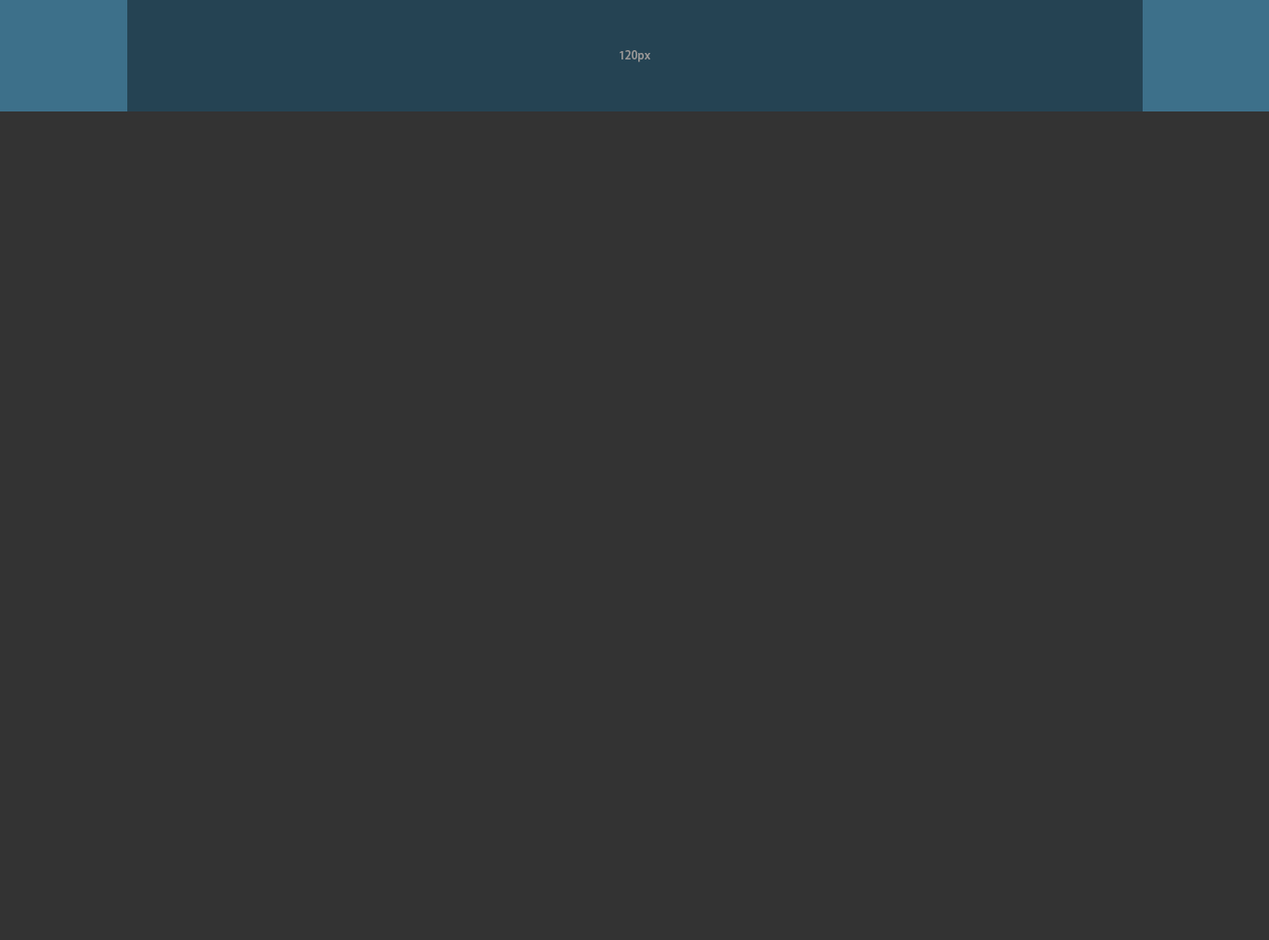
<style>
.page{position:relative;width:1269px;height:940px;background:#333333}
.page>*{position:absolute;margin:0}
.t1{font:11.1px "AdobeHeitiStd-Regular";color:#999898}
</style>
<div class="page">
<p class="t1" style="left:619px;top:50px;width:31px;height:12px">120px</p>
</div>
